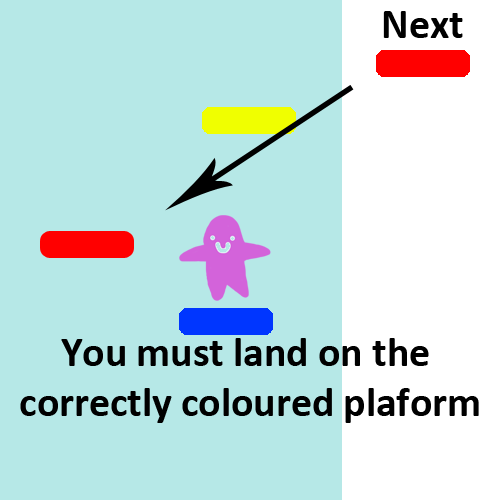
<style>
.page{position:relative;width:500px;height:500px;background:#b6e8e7}
.page>*{position:absolute;margin:0}
.t1{font:41.7px "Calibri-Bold";color:#000000}
</style>
<div class="page">
<p class="t1" style="left:20px;top:338px;width:459px;height:85px;text-align:center">You must land on the <br>correctly coloured plaform</p>
</div>
